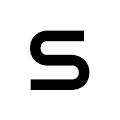
<style>
.page{position:relative;width:120px;height:120px;background:#ffffff}
.page>*{position:absolute;margin:0}
.t1{font:85px "Audiowide-Regular";color:#000000}
</style>
<div class="page">
<p class="t1" style="left:30px;top:30px;width:60px;height:60px">S</p>
</div>
